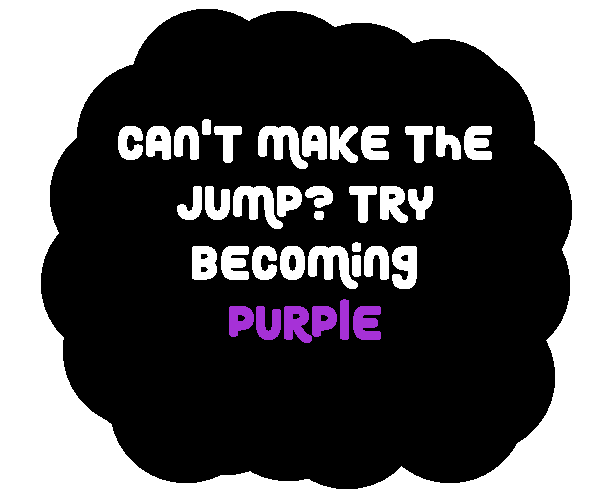
<style>
.page{position:relative;width:600px;height:500px;background:#000000}
.page>*{position:absolute;margin:0}
.t1{font:50px "RoundyRainbows";color:#ffffff}
.t2{font:50px "RoundyRainbows";color:#a631d7}
</style>
<div class="page">
<p class="t1" style="left:118px;top:119px;width:374px;height:224px;text-align:center">Can't make the jump? Try becoming <span class="t2">Purple</span></p>
</div>
